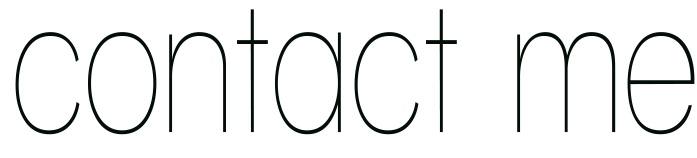
<style>
.page{position:relative;width:697px;height:158px;background:#ffffff}
.page>*{position:absolute;margin:0}
.t1{font:199.7px "WalkwayCondensed";color:#020e06}
</style>
<div class="page">
<p class="t1" style="left:15px;top:9px;width:680px;height:126px">contact me</p>
</div>
